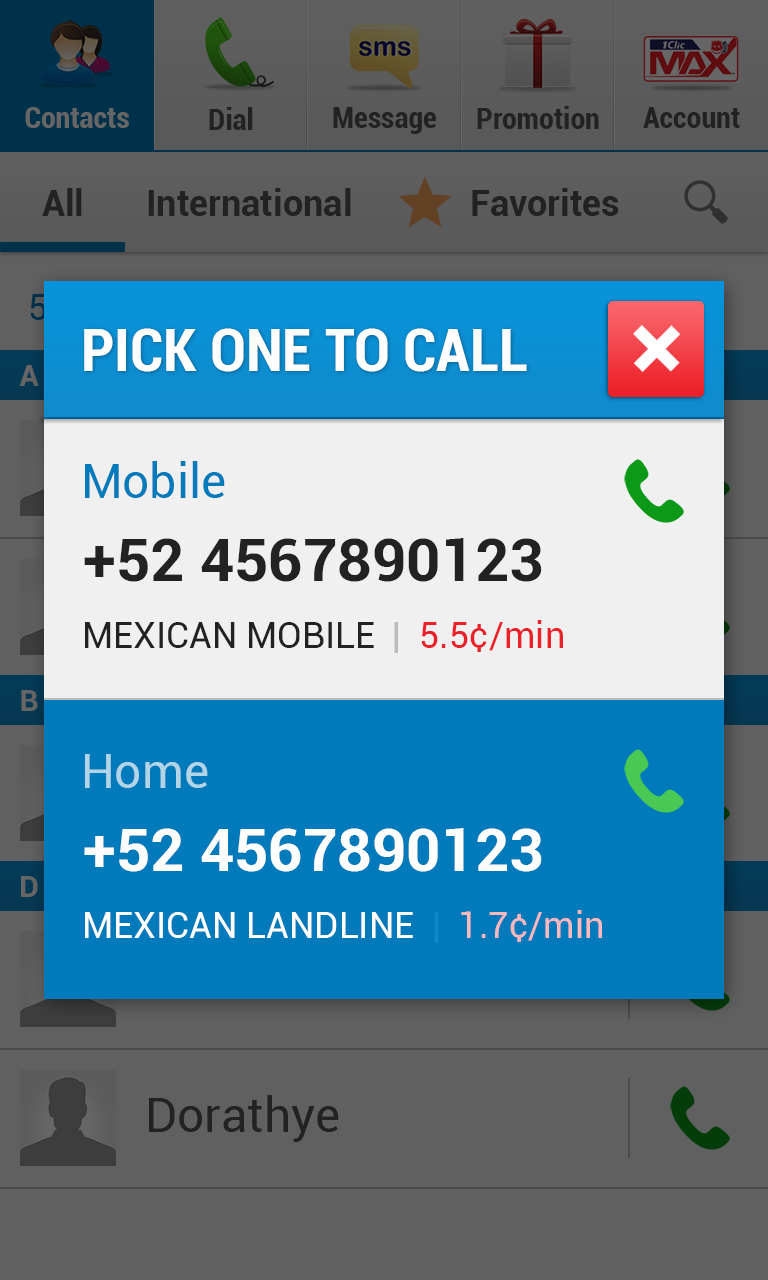
<style>
.page{position:relative;width:768px;height:1280px;background:#606060}
.page>*{position:absolute;margin:0}
.t1{font:30px "Roboto-BoldCondensed";color:#666666}
.t2{font:30px "Roboto-BoldCondensed";color:#222222}
.t3{font:36px "Roboto-Bold";color:#222222}
.t4{font:60px "Roboto-BoldCondensed";color:#ffffff}
.t5{font:30px "Roboto-Bold";color:#666666}
.t6{font:48px "Roboto-Regular";color:#007abb}
.t7{font:60px "Roboto-Bold";color:#222222}
.t8{font:36px "Roboto-Regular";color:#222222}
.t9{font:36px "Roboto-Regular";color:#bbbbbb}
.t10{font:36px "Roboto-Regular";color:#ec2028}
.t11{font:48px "Roboto-Regular";color:#b1d4e7}
.t12{font:60px "Roboto-Bold";color:#ffffff}
.t13{font:36px "Roboto-Regular";color:#ffffff}
.t14{font:36px "Roboto-Regular";color:#1087c6}
.t15{font:36px "Roboto-Regular";color:#ffb9bc}
.t16{font:48px "Roboto-Regular";color:#222222}
</style>
<div class="page">
<p class="t1" style="left:25px;top:107px;width:104px;height:21px">Contacts</p>
<p class="t2" style="left:209px;top:107px;width:44px;height:23px">Dial</p>
<p class="t2" style="left:333px;top:107px;width:103px;height:27px">Message</p>
<p class="t2" style="left:477px;top:106px;width:122px;height:23px">Promotion</p>
<p class="t2" style="left:643px;top:107px;width:97px;height:21px">Account</p>
<p class="t3" style="left:42px;top:188px;width:40px;height:28px">All</p>
<p class="t3" style="left:148px;top:188px;width:203px;height:28px">International</p>
<p class="t3" style="left:472px;top:188px;width:147px;height:28px">Favorites</p>
<p class="t4" style="left:84px;top:328px;width:443px;height:44px">PICK ONE TO CALL</p>
<p class="t5" style="left:19px;top:365px;width:20px;height:21px">A</p>
<p class="t6" style="left:85px;top:461px;width:140px;height:37px">Mobile</p>
<p class="t7" style="left:84px;top:538px;width:458px;height:44px">+52 4567890123</p>
<p class="t8" style="left:85px;top:620px;width:478px;height:33px">MEXICAN MOBILE<span class="t9">  |  </span><span class="t10">5.5¢/min</span></p>
<p class="t5" style="left:21px;top:690px;width:17px;height:21px">B</p>
<p class="t11" style="left:85px;top:754px;width:123px;height:34px">Home</p>
<p class="t12" style="left:84px;top:828px;width:458px;height:44px">+52 4567890123</p>
<p class="t5" style="left:21px;top:876px;width:17px;height:21px">D</p>
<p class="t13" style="left:85px;top:910px;width:517px;height:33px">MEXICAN LANDLINE<span class="t14">  |  </span><span class="t15">1.7¢/min</span></p>
<p class="t16" style="left:149px;top:1095px;width:190px;height:47px">Dorathye</p>
</div>
